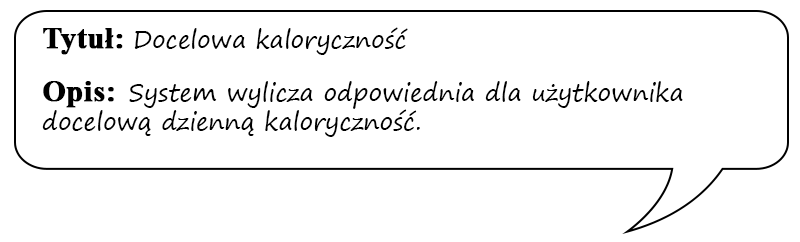
<style>
.page{position:relative;width:800px;height:242px;background:#ffffff}
.page>*{position:absolute;margin:0}
.t1{font:24px "SegoePrint";color:#000000}
.t2{font:30px "TimesNewRomanPS-BoldMT";color:#000000;font-weight:bold}
</style>
<div class="page">
<p class="t1" style="left:42px;top:27px;width:641px;height:110px"><span class="t2">Tytuł: </span>Docelowa kaloryczność<br><br><span class="t2">Opis:  </span>System wylicza odpowiednia dla użytkownika docelową dzienną kaloryczność.</p>
</div>
